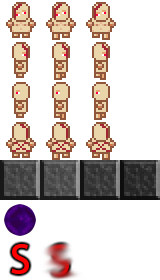
<style>
.page{position:relative;width:160px;height:280px;background:#ffffff}
.page>*{position:absolute;margin:0}
.t1{font:38px "AdobeHeitiStd-Regular";color:#ff0000}
</style>
<div class="page">
<p class="t1" style="left:11px;top:244px;width:18px;height:30px">S</p>
</div>
